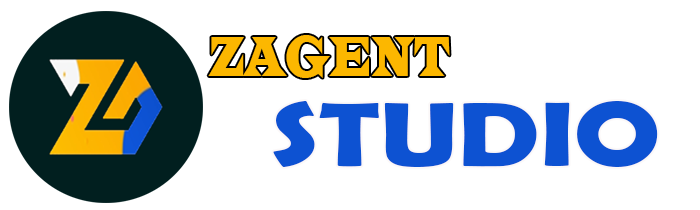
<style>
.page{position:relative;width:700px;height:210px;background:#ffffff}
.page>*{position:absolute;margin:0}
.t1{font:59.1px "LatinWide";color:#fcb700;scale:0.51 1}
.t2{font:91.7px "BerlinSansFBDemi-Bold";color:#0d52d2;scale:1.26 1}
</style>
<div class="page">
<p class="t1" style="left:208px;top:35px;width:242px;height:43px">ZAGENT</p>
<p class="t2" style="left:273px;top:101px;width:385px;height:66px">STUDIO</p>
</div>
